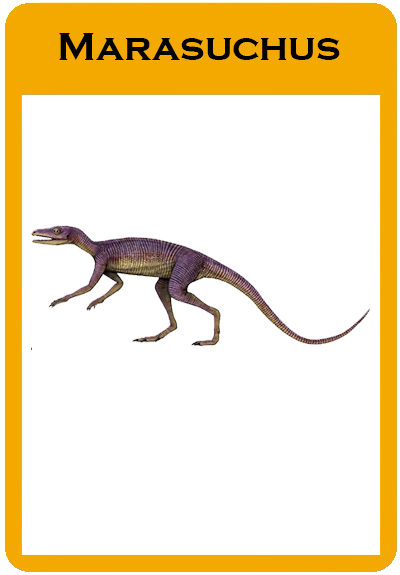
<style>
.page{position:relative;width:400px;height:575px;background:#ffffff}
.page>*{position:absolute;margin:0}
.t1{font:40px "CopperplateGothic-Bold";color:#000000}
</style>
<div class="page">
<p class="t1" style="left:59px;top:33px;width:281px;height:27px">Marasuchus</p>
</div>
